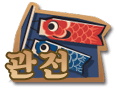
<style>
.page{position:relative;width:117px;height:93px;background:#ffffff}
.page>*{position:absolute;margin:0}
.t1{font:30.8px "SDKukdetopokki-bBd";letter-spacing:0.08em;scale:1.08 1}
</style>
<div class="page">
<p class="t1" style="left:6px;top:50px;width:62px;height:29px">관전</p>
</div>
